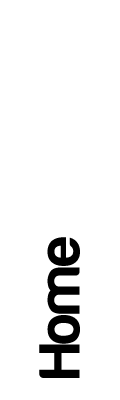
<style>
.page{position:relative;width:120px;height:400px;background:#ffffff}
.page>*{position:absolute;margin:0}
.t1{font:60px "Harabara-Bold";color:#000000}
</style>
<div class="page">
<p class="t1" style="left:39px;top:237px;width:41px;height:141px;rotate:-90deg">Home</p>
</div>
